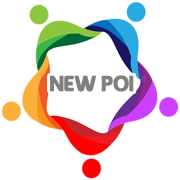
<style>
.page{position:relative;width:180px;height:180px;background:#ffffff}
.page>*{position:absolute;margin:0}
.t1{font:22.3px "Queen-of-Camelot";color:#808080;font-weight:bold;scale:0.96 1}
</style>
<div class="page">
<p class="t1" style="left:50px;top:75px;width:84px;height:17px">New POI</p>
</div>
